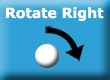
<style>
.page{position:relative;width:110px;height:80px;background:#2fa1d7}
.page>*{position:absolute;margin:0}
.t1{font:14px "Verdana-Bold";color:#ffffff}
</style>
<div class="page">
<p class="t1" style="left:6px;top:7px;width:98px;height:14px">Rotate Right</p>
</div>
